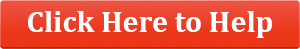
<style>
.page{position:relative;width:300px;height:49px}
.page>*{position:absolute;margin:0}
.t1{font:30px "Cambria-Bold";color:#ffffff}
</style>
<div class="page">
<p class="t1" style="left:28px;top:11px;width:244px;height:27px">Click Here to Help</p>
</div>
